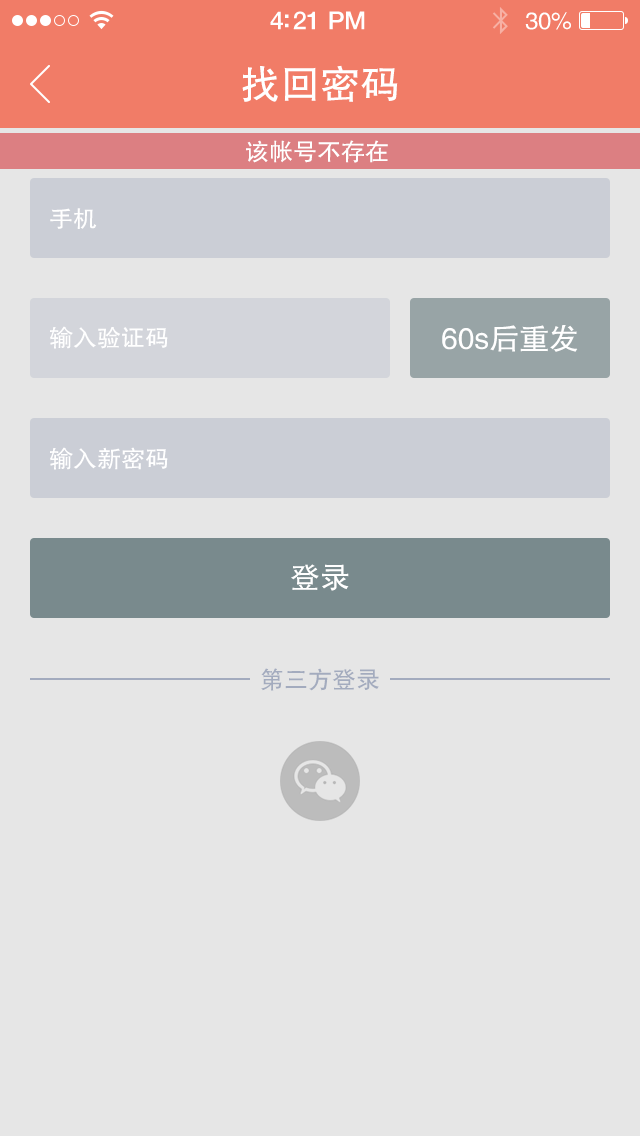
<style>
.page{position:relative;width:640px;height:1136px;background:#e6e6e6}
.page>*{position:absolute;margin:0}
.t1{font:25px "HelveticaNeue-Medium";letter-spacing:-0.02em;color:#ffffff}
.t2{font:24px "FZHTJW--GB1-0";letter-spacing:-0.02em;color:#ffffff}
.t3{font:40px "FZHTJW--GB1-0";color:#ffffff}
.t4{font:24px "FZHTJW--GB1-0";color:#ffffff}
.t5{font:30px "FZHTJW--GB1-0";color:#ffffff}
.t6{font:24px "FZHTJW--GB1-0";color:#a3abbe}
</style>
<div class="page">
<p class="t1" style="left:270px;top:11px;width:95px;height:19px">4:21 PM</p>
<p class="t2" style="left:525px;top:12px;width:46px;height:18px">30%</p>
<p class="t3" style="left:242px;top:65px;width:156px;height:37px">找回密码</p>
<p class="t4" style="left:246px;top:140px;width:142px;height:23px">该帐号不存在</p>
<p class="t4" style="left:50px;top:208px;width:47px;height:21px">手机</p>
<p class="t4" style="left:50px;top:326px;width:118px;height:23px">输入验证码</p>
<p class="t5" style="left:442px;top:325px;width:136px;height:27px">60s后重发</p>
<p class="t4" style="left:50px;top:447px;width:118px;height:23px">输入新密码</p>
<p class="t5" style="left:291px;top:564px;width:58px;height:27px">登录</p>
<p class="t6" style="left:261px;top:668px;width:118px;height:23px">第三方登录</p>
</div>
